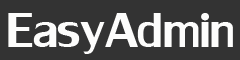
<style>
.page{position:relative;width:240px;height:60px;background:#333333}
.page>*{position:absolute;margin:0}
.t1{font:74px "LilyUPC";color:#fdfdfc}
</style>
<div class="page">
<p class="t1" style="left:8px;top:13px;width:225px;height:41px">EasyAdmin</p>
</div>
